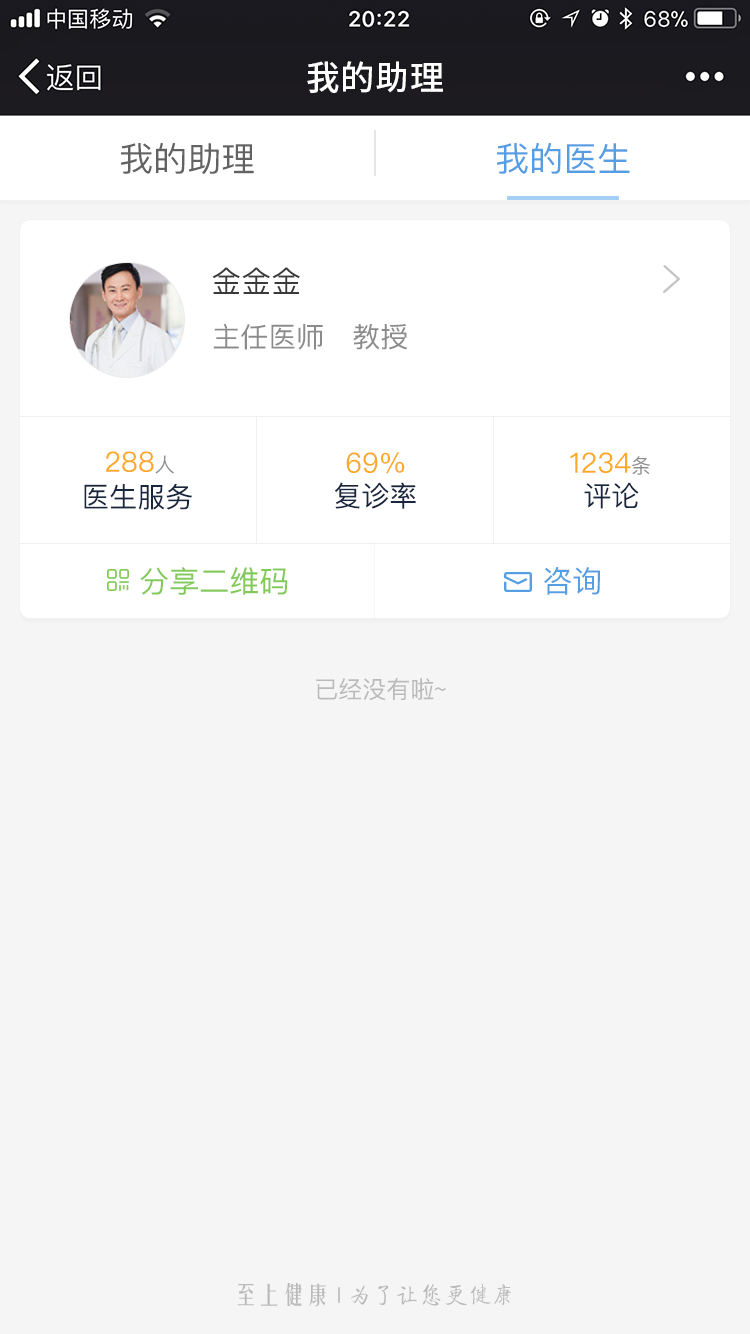
<style>
.page{position:relative;width:750px;height:1334px;background:#f5f5f5}
.page>*{position:absolute;margin:0}
.t1{font:34px "SourceHanSansCN-Medium";letter-spacing:0.02em;color:#ffffff}
.t2{font:34px "PingFangSC-Regular";color:#626262}
.t3{font:34px "PingFangSC-Regular";color:#569ee3}
.t4{font:30px "PingFangSC-Regular";color:#3a3a3a}
.t5{font:28px "PingFangSC-Regular";color:#8b8b8b}
.t6{font:28px "PingFangSC-Regular";color:#fea827}
.t7{font:20px "PingFangSC-Regular";color:#8d8d8d}
.t8{font:28px "PingFangSC-Regular";color:#18263e}
.t9{font:30px "PingFangSC-Regular";color:#81ca58}
.t10{font:30px "PingFangSC-Regular";color:#569ee3}
.t11{font:24px "PingFangSC-Regular";color:#bababa}
.t12{font:24px "FZQTJW--GB1-0";color:#bababa}
.t13{font:24px "FZYTJW--GB1-0";color:#bababa}
</style>
<div class="page">
<p class="t1" style="left:307px;top:61px;width:136px;height:32px">我的助理</p>
<p class="t2" style="left:121px;top:143px;width:133px;height:32px">我的助理</p>
<p class="t3" style="left:497px;top:143px;width:133px;height:31px">我的医生</p>
<p class="t4" style="left:212px;top:267px;width:88px;height:27px">金金金</p>
<p class="t5" style="left:213px;top:323px;width:195px;height:27px">主任医师   教授</p>
<p class="t6" style="left:106px;top:451px;width:68px;height:23px">288<span class="t7">人</span></p>
<p class="t6" style="left:346px;top:452px;width:59px;height:22px">69%</p>
<p class="t6" style="left:570px;top:452px;width:80px;height:23px">1234<span class="t7">条</span></p>
<p class="t8" style="left:84px;top:483px;width:108px;height:27px">医生服务</p>
<p class="t8" style="left:334px;top:482px;width:82px;height:27px">复诊率</p>
<p class="t8" style="left:584px;top:482px;width:55px;height:27px">评论</p>
<p class="t9" style="left:140px;top:567px;width:148px;height:28px">分享二维码</p>
<p class="t10" style="left:544px;top:567px;width:56px;height:28px">咨询</p>
<p class="t11" style="left:316px;top:678px;width:130px;height:23px">已经没有啦~</p>
<p class="t12" style="left:237px;top:1283px;width:274px;height:24px"><span class="t13">至上健康   </span>为了让您更健康</p>
</div>
